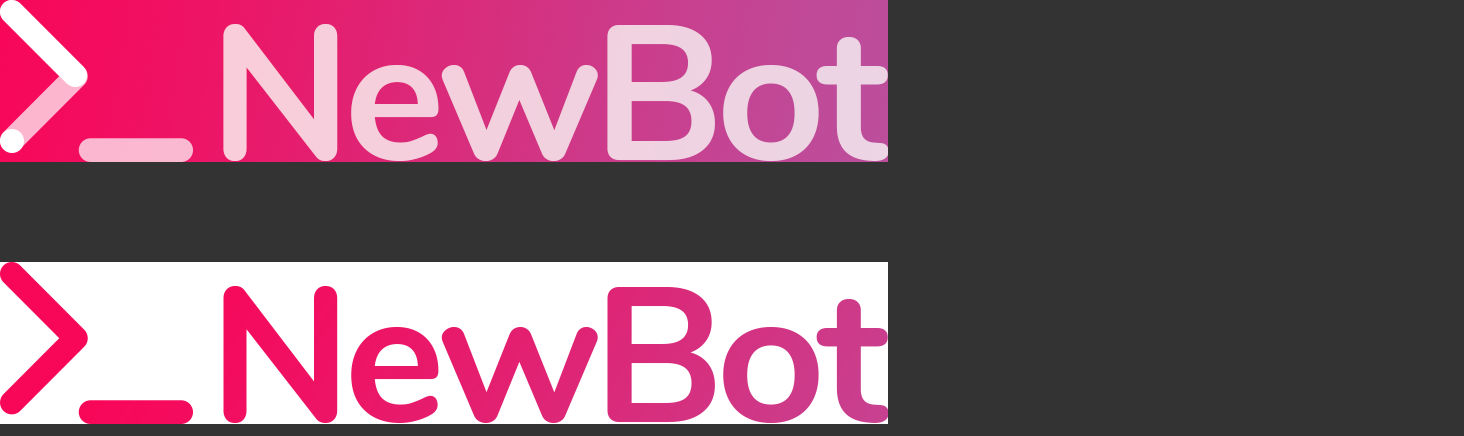
<style>
.page{position:relative;width:1464px;height:436px;background:#333333}
.page>*{position:absolute;margin:0}
.t1{font:190.7px "Nunito-Bold";letter-spacing:-0.04em;color:#f1d1df}
.t2{font:190.7px "Nunito-Bold";letter-spacing:-0.04em;color:#de2575}
</style>
<div class="page">
<p class="t1" style="left:223px;top:24px;width:666px;height:137px">NewBot</p>
<p class="t2" style="left:223px;top:286px;width:666px;height:137px">NewBot</p>
</div>
